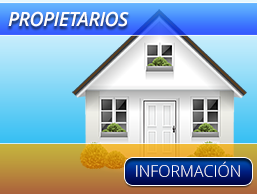
<style>
.page{position:relative;width:257px;height:194px}
.page>*{position:absolute;margin:0}
.t1{font:19.6px "OpenSans-SemiboldItalic";letter-spacing:-0.025em;color:#fffefe}
.t2{font:16px "OpenSans-Light";color:#ffffff}
</style>
<div class="page">
<p class="t1" style="left:8px;top:11px;width:121px;height:16px">PROPIETARIOS</p>
<p class="t2" style="left:136px;top:161px;width:104px;height:16px">INFORMACIÓN</p>
</div>
